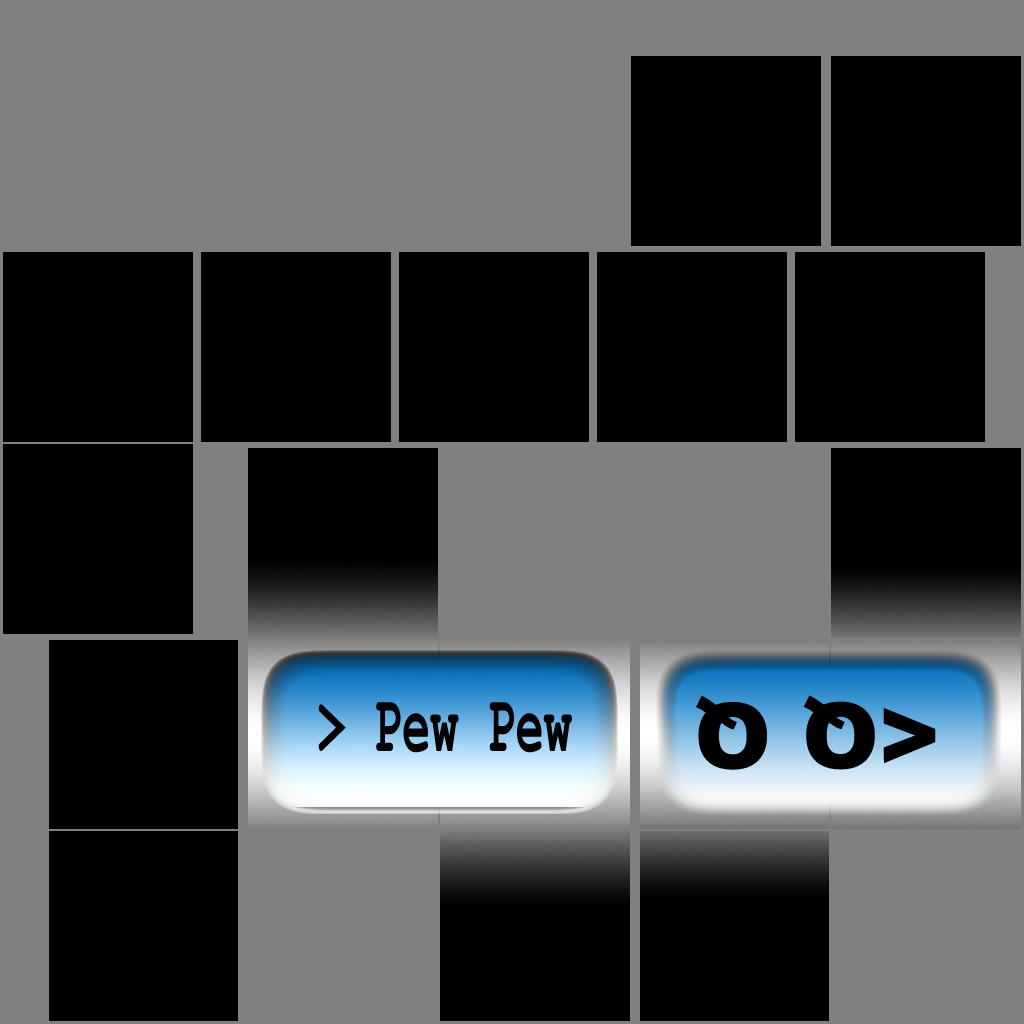
<style>
.page{position:relative;width:1024px;height:1024px;background:#000000}
.page>*{position:absolute;margin:0}
.t1{font:82.6px "CourierNewPS-BoldMT";color:#010000;scale:0.57 1}
.t2{font:91.6px "Arial-Black";color:#010000}
</style>
<div class="page">
<p class="t1" style="left:318px;top:702px;width:254px;height:51px">&gt; Pew Pew</p>
<p class="t2" style="left:696px;top:695px;width:240px;height:75px;rotate:180deg">&lt;Q Q</p>
</div>
